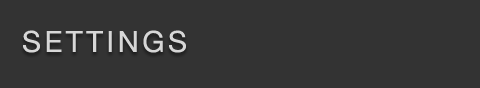
<style>
.page{position:relative;width:480px;height:88px;background:#333333}
.page>*{position:absolute;margin:0}
.t1{font:29.3px "HelveticaNeue";letter-spacing:0.12em;color:#d7d7d7}
</style>
<div class="page">
<p class="t1" style="left:23px;top:30px;width:163px;height:23px">SETTINGS</p>
</div>
